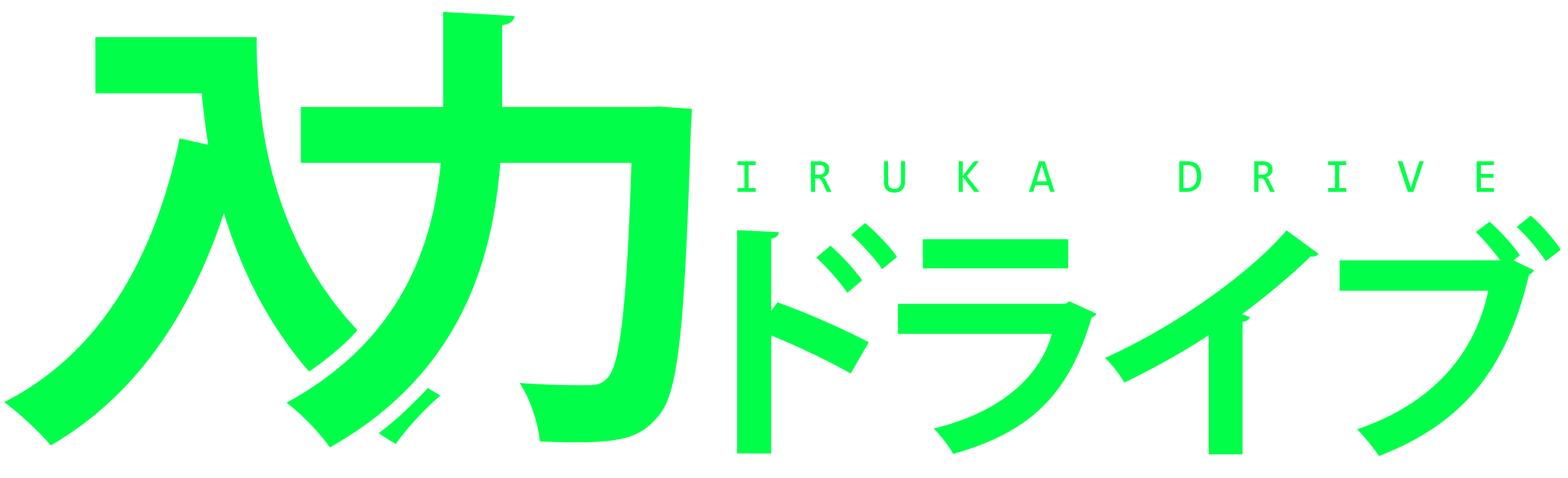
<style>
.page{position:relative;width:1568px;height:478px;background:#ffffff}
.page>*{position:absolute;margin:0}
.t1{font:460.5px "KozGoPr6N-Bold";letter-spacing:-0.06em;color:#00ff48}
.t2{font:47.6px "Consolas";letter-spacing:1em;color:#00ff48}
.t3{font:254.1px "KozGoPr6N-Bold";letter-spacing:-0.14em;color:#00ff48}
</style>
<div class="page">
<p class="t1" style="left:286px;top:11px;width:407px;height:437px">力</p>
<p class="t1" style="left:4px;top:36px;width:437px;height:410px">入</p>
<p class="t2" style="left:737px;top:161px;width:757px;height:32px">IRUKA DRIVE</p>
<p class="t3" style="left:736px;top:216px;width:825px;height:241px">ドライブ</p>
</div>
